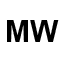
<style>
.page{position:relative;width:64px;height:64px;background:#ffffff}
.page>*{position:absolute;margin:0}
.t1{font:30px "Arial-BoldMT";color:#000000}
</style>
<div class="page">
<p class="t1" style="left:7px;top:20px;width:52px;height:22px">MW</p>
</div>
